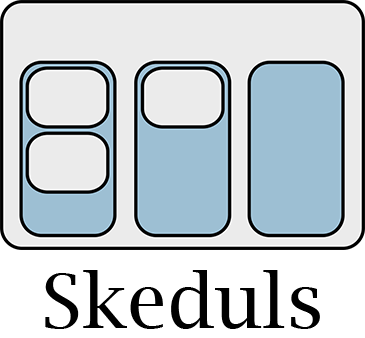
<style>
.page{position:relative;width:365px;height:338px;background:#ebebeb}
.page>*{position:absolute;margin:0}
.t1{font:75px "LucidaBright";color:#000000}
</style>
<div class="page">
<p class="t1" style="left:45px;top:270px;width:275px;height:59px">Skeduls</p>
</div>
